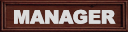
<style>
.page{position:relative;width:128px;height:32px}
.page>*{position:absolute;margin:0}
.t1{font:18.7px "Arial-Black";letter-spacing:-0.025em;color:#dadada}
</style>
<div class="page">
<p class="t1" style="left:14px;top:9px;width:102px;height:15px">MANAGER</p>
</div>
